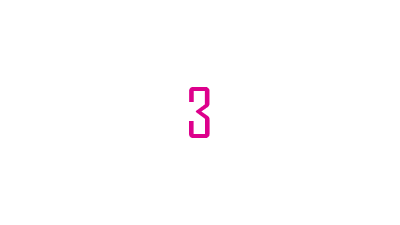
<style>
.page{position:relative;width:400px;height:225px;background:#ffffff}
.page>*{position:absolute;margin:0}
.t1{font:66.7px "AgencyFB-Reg";color:#dd008c}
</style>
<div class="page">
<p class="t1" style="left:189px;top:87px;width:21px;height:51px">3</p>
</div>
